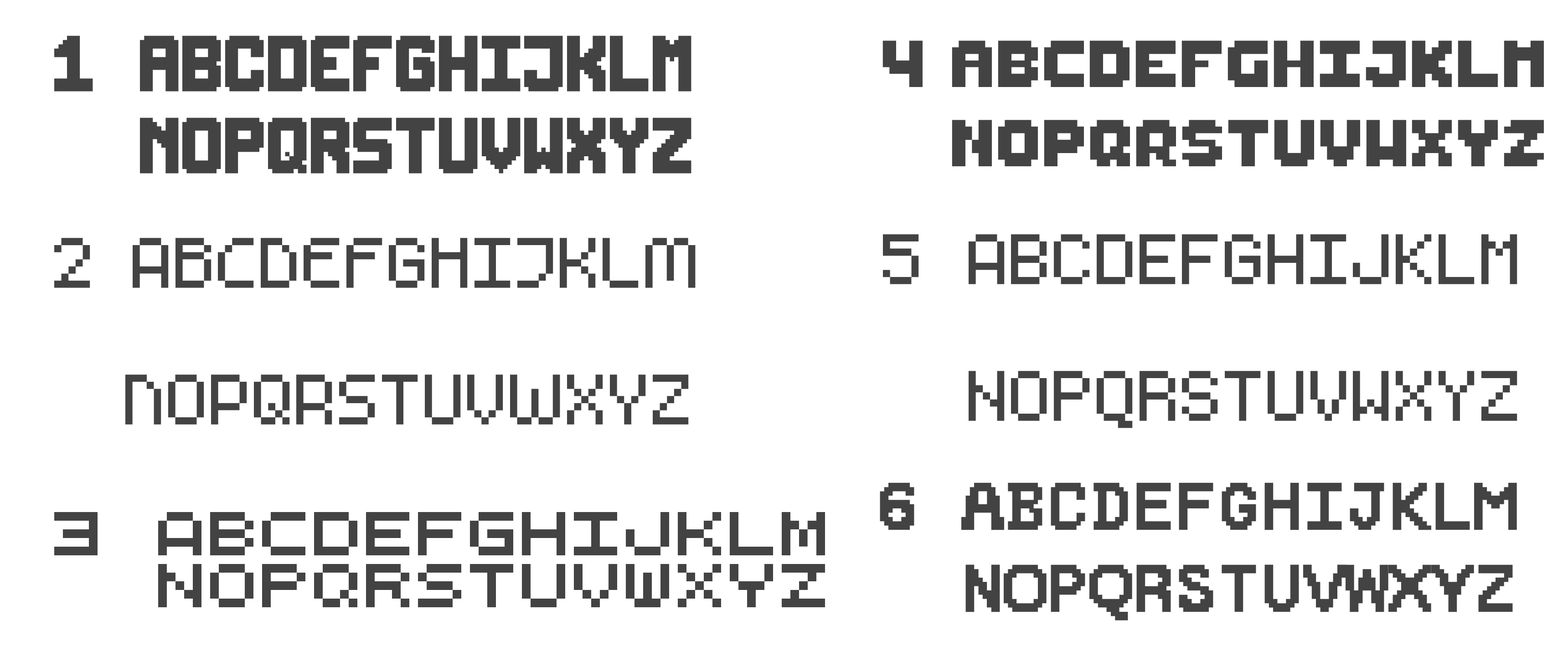
<style>
.page{position:relative;width:1568px;height:656px;background:#ffffff}
.page>*{position:absolute;margin:0}
.t1{font:68.4px "Round9x13";color:#434343}
.t2{font:66.1px "ChonklyRegular";color:#434343}
.t3{font:114px "m5x7";color:#434343}
.t4{font:114px "monogramextended";color:#434343}
.t5{font:68.4px "PeaberryMono";color:#434343}
.t6{font:43.3px "QuinqueFive";color:#434343}
</style>
<div class="page">
<p class="t1" style="left:54px;top:36px;width:637px;height:138px">1  ABCDEFGHIJKLM<br>    NOPQRSTUVWXYZ</p>
<p class="t2" style="left:882px;top:41px;width:662px;height:125px">4 ABCDEFGHIJKLM<br>   NOPQRSTUVWXYZ</p>
<p class="t3" style="left:54px;top:238px;width:642px;height:187px">2 ABCDEFGHIJKLM<br>  NOPQRSTUVWXYZ</p>
<p class="t4" style="left:883px;top:234px;width:634px;height:194px">5 ABCDEFGHIJKLM<br>  NOPQRSTUVWXYZ</p>
<p class="t5" style="left:880px;top:483px;width:637px;height:138px">6 ABCDEFGHIJKLM<br>  NOPQRSTUVWXYZ</p>
<p class="t6" style="left:54px;top:512px;width:771px;height:96px">3 ABCDEFGHIJKLM<br>  NOPQRSTUVWXYZ</p>
</div>
